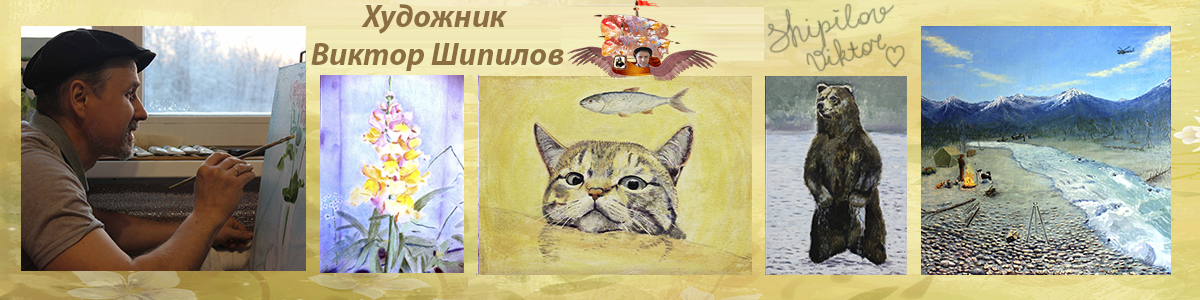
<style>
.page{position:relative;width:1200px;height:300px}
.page>*{position:absolute;margin:0}
.t1{font:31.8px "MyriadPro-BoldIt";color:#8a6e41}
.t2{font:31.8px "MyriadPro-BoldIt";color:#fefdf3}
</style>
<div class="page">
<p class="t1" style="left:311px;top:4px;width:253px;height:67px"><span class="t2">         </span>Художник<br>Виктор Шипилов</p>
</div>
